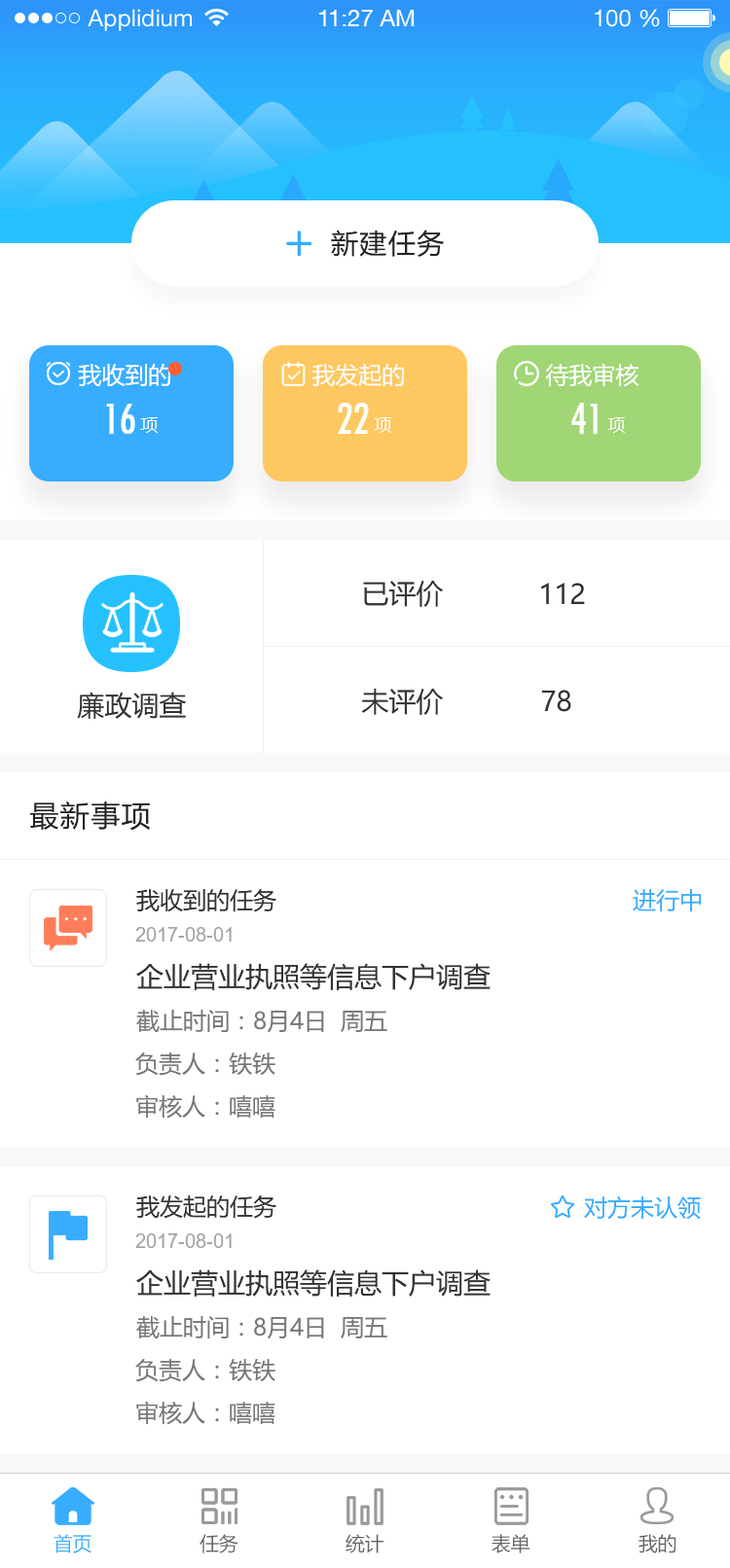
<style>
.page{position:relative;width:730px;height:1568px;background:#ffffff}
.page>*{position:absolute;margin:0}
.t1{font:23.3px "HelveticaNeueLTStd-Roman";color:#ffffff}
.t2{font:23.3px "HelveticaNeueCE-Roman";color:#ffffff}
.t3{font:27.2px "MicrosoftYaHei";letter-spacing:0.05em;color:#222222}
.t4{font:23.3px "MicrosoftYaHei";color:#fefefe}
.t5{font:48.6px "TwCenMT-Condensed";letter-spacing:-0.025em;color:#fefefe}
.t6{font:17.5px "MicrosoftYaHei";letter-spacing:0.1em;color:#fefefe}
.t7{font:27.2px "MicrosoftYaHei";color:#333333}
.t8{font:29.2px "MicrosoftYaHei";letter-spacing:0.05em;color:#222222}
.t9{font:23.3px "MicrosoftYaHei";color:#333333}
.t10{font:23.3px "MicrosoftYaHei";color:#38adff}
.t11{font:19.5px "ArialMT";color:#a3a3a3}
.t12{font:23.3px "MicrosoftYaHei";color:#777777}
.t13{font:19.5px "MicrosoftYaHei";color:#38adff;text-transform:uppercase}
.t14{font:19.5px "MicrosoftYaHei";color:#666666;text-transform:uppercase}
</style>
<div class="page">
<p class="t1" style="left:88px;top:9px;width:104px;height:22px">Applidium</p>
<p class="t2" style="left:319px;top:10px;width:95px;height:16px">11:27 AM</p>
<p class="t1" style="left:594px;top:9px;width:65px;height:18px">100 %</p>
<p class="t3" style="left:331px;top:230px;width:114px;height:27px">新建任务</p>
<p class="t4" style="left:78px;top:364px;width:92px;height:22px">我收到的</p>
<p class="t4" style="left:311px;top:364px;width:93px;height:23px">我发起的</p>
<p class="t4" style="left:545px;top:363px;width:94px;height:24px">待我审核</p>
<p class="t5" style="left:106px;top:404px;width:29px;height:30px">16</p>
<p class="t5" style="left:338px;top:403px;width:31px;height:31px">22</p>
<p class="t5" style="left:571px;top:403px;width:26px;height:31px">41</p>
<p class="t6" style="left:140px;top:417px;width:18px;height:16px">项</p>
<p class="t6" style="left:374px;top:417px;width:17px;height:16px">项</p>
<p class="t6" style="left:607px;top:417px;width:17px;height:16px">项</p>
<p class="t7" style="left:363px;top:581px;width:80px;height:26px">已评价</p>
<p class="t7" style="left:541px;top:583px;width:44px;height:21px">112</p>
<p class="t7" style="left:362px;top:688px;width:81px;height:27px">未评价</p>
<p class="t7" style="left:541px;top:690px;width:30px;height:22px">78</p>
<p class="t7" style="left:77px;top:692px;width:109px;height:27px">廉政调查</p>
<p class="t8" style="left:29px;top:802px;width:121px;height:29px">最新事项</p>
<p class="t9" style="left:136px;top:888px;width:140px;height:24px">我收到的任务</p>
<p class="t10" style="left:632px;top:889px;width:69px;height:23px">进行中</p>
<p class="t11" style="left:135px;top:927px;width:97px;height:15px">2017-08-01</p>
<p class="t7" style="left:136px;top:963px;width:354px;height:27px">企业营业执照等信息下户调查</p>
<p class="t12" style="left:136px;top:1010px;width:251px;height:23px">截止时间：8月4日  周五</p>
<p class="t12" style="left:135px;top:1052px;width:140px;height:24px">负责人：铁铁</p>
<p class="t12" style="left:136px;top:1094px;width:139px;height:25px">审核人：嘻嘻</p>
<p class="t9" style="left:136px;top:1194px;width:140px;height:25px">我发起的任务</p>
<p class="t10" style="left:584px;top:1196px;width:116px;height:24px">对方未认领</p>
<p class="t11" style="left:135px;top:1233px;width:97px;height:15px">2017-08-01</p>
<p class="t7" style="left:136px;top:1269px;width:354px;height:28px">企业营业执照等信息下户调查</p>
<p class="t12" style="left:136px;top:1316px;width:251px;height:23px">截止时间：8月4日  周五</p>
<p class="t12" style="left:135px;top:1359px;width:140px;height:23px">负责人：铁铁</p>
<p class="t12" style="left:136px;top:1401px;width:139px;height:24px">审核人：嘻嘻</p>
<p class="t13" style="left:53px;top:1534px;width:38px;height:19px">首页</p>
<p class="t14" style="left:199px;top:1534px;width:39px;height:19px">任务</p>
<p class="t14" style="left:345px;top:1534px;width:38px;height:19px">统计</p>
<p class="t14" style="left:491px;top:1534px;width:39px;height:19px">表单</p>
<p class="t14" style="left:638px;top:1534px;width:38px;height:19px">我的</p>
</div>
